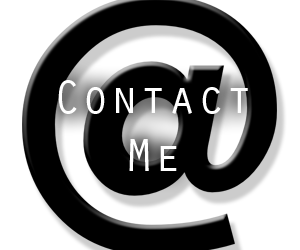
<style>
.page{position:relative;width:300px;height:250px;background:#ffffff}
.page>*{position:absolute;margin:0}
.t1{font:48px "OratorStd";color:#ffffff}
</style>
<div class="page">
<p class="t1" style="left:58px;top:80px;width:190px;height:91px;text-align:center">Contact<br>Me</p>
</div>
